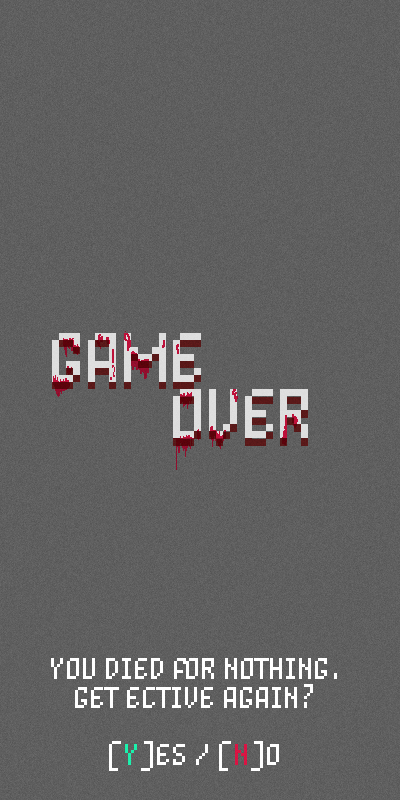
<style>
.page{position:relative;width:400px;height:800px}
.page>*{position:absolute;margin:0}
.t1{font:56px "Unibody8Pro-RegularItalic";letter-spacing:-0.085em;color:#dedede;text-transform:uppercase}
.t2{font:24px "Unibody8Pro-RegularItalic";letter-spacing:-0.085em;color:#ffffff;text-transform:uppercase}
.t3{font:24px "Unibody8Pro-RegularItalic";letter-spacing:-0.085em;color:#1bf1ac;text-transform:uppercase}
.t4{font:24px "Unibody8Pro-RegularItalic";letter-spacing:-0.085em;color:#da1443;text-transform:uppercase}
</style>
<div class="page">
<p class="t1" style="left:52px;top:333px;width:149px;height:49px">GAME</p>
<p class="t1" style="left:173px;top:389px;width:135px;height:49px">OVER</p>
<p class="t2" style="left:51px;top:658px;width:286px;height:113px;text-align:center">YOU DIED FOR NOTHING.<br>GET ECTIVE AGAIN?<br><br>[<span class="t3">Y</span>]ES / [<span class="t4">N</span>]O</p>
</div>
